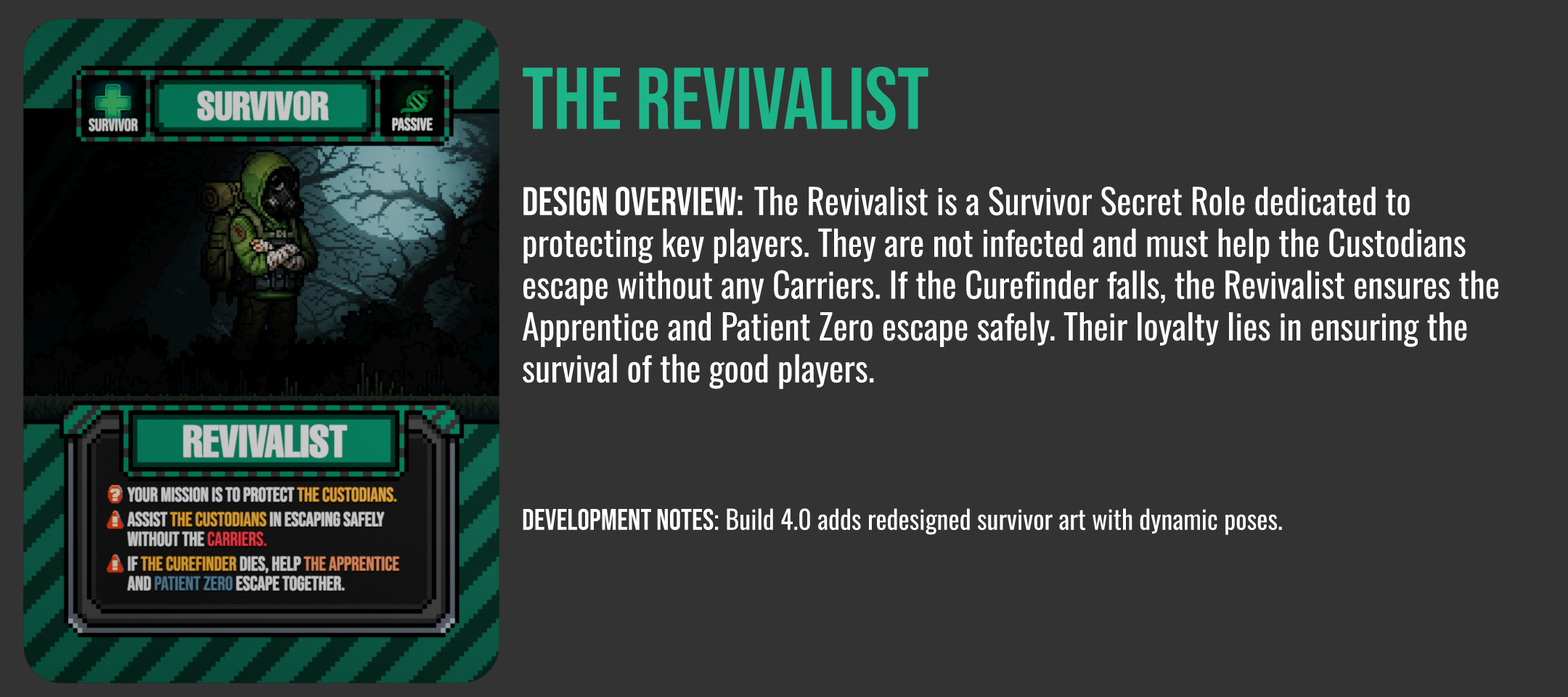
<style>
.page{position:relative;width:1568px;height:697px;background:#333333}
.page>*{position:absolute;margin:0}
.t1{font:87.1px "BebasNeue-Regular";color:#1eb48a}
.t2{font:34.8px "Oswald-Regular";color:#ffffff}
.t3{font:39.9px "BebasNeue-Regular";color:#ffffff}
.t4{font:26.1px "Oswald-Regular";color:#ffffff}
.t5{font:29.8px "BebasNeue-Regular";color:#ffffff}
</style>
<div class="page">
<p class="t1" style="left:523px;top:67px;width:405px;height:63px">THE REVIVALIST</p>
<p class="t2" style="left:523px;top:187px;width:975px;height:202px"><span class="t3">Design Overview: </span>The Revivalist is a Survivor Secret Role dedicated to protecting key players. They are not infected and must help the Custodians escape without any Carriers. If the Curefinder falls, the Revivalist ensures the Apprentice and Patient Zero escape safely. Their loyalty lies in ensuring the survival of the good players.</p>
<p class="t4" style="left:523px;top:508px;width:759px;height:27px"><span class="t5">development Notes:</span> Build 4.0 adds redesigned survivor art with dynamic poses.</p>
</div>
